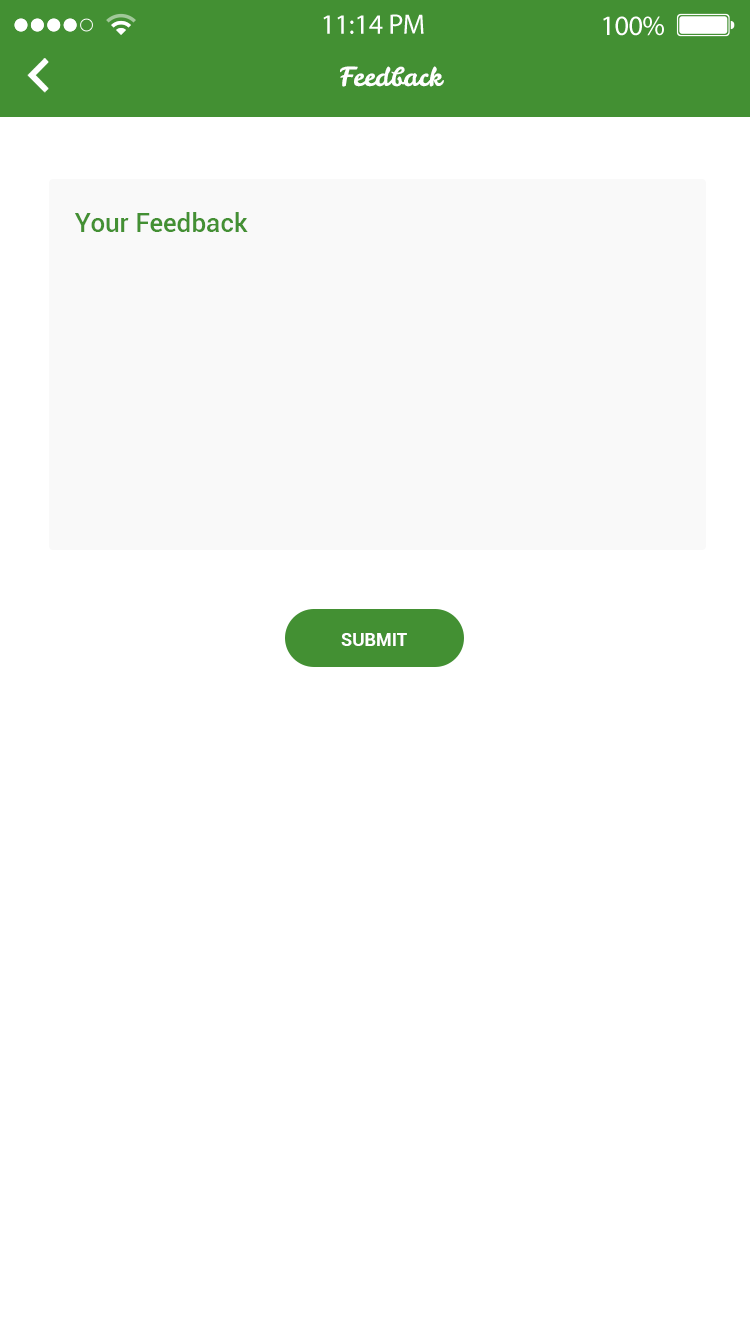
<style>
.page{position:relative;width:750px;height:1334px;background:#ffffff}
.page>*{position:absolute;margin:0}
.t1{font:26px "LeckerliOne-Regular";color:#ffffff}
.t2{font:26px "Roboto-Medium";color:#439033}
.t3{font:18px "Roboto-Bold";color:#ffffff}
</style>
<div class="page">
<p class="t1" style="left:340px;top:66px;width:104px;height:21px">Feedback</p>
<p class="t2" style="left:75px;top:212px;width:173px;height:20px">Your Feedback</p>
<p class="t3" style="left:341px;top:633px;width:66px;height:13px">SUBMIT</p>
</div>
